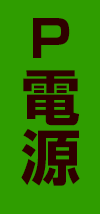
<style>
.page{position:relative;width:100px;height:214px;background:#2f9d00}
.page>*{position:absolute;margin:0}
.t1{font:12px "ShinGoPro-Bold";color:#2f0000}
.t2{font:14.4px "ShinGoPro-Bold";color:#2f0000}
</style>
<div class="page">
<p class="t1" style="left:33px;top:18px;width:37px;height:40px;text-align:center">P</p>
<p class="t2" style="left:21px;top:70px;width:59px;height:116px;text-align:center">電源</p>
</div>
